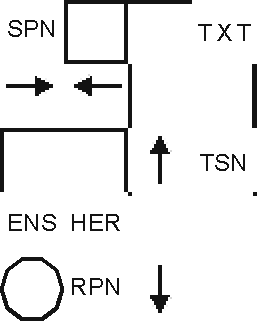
<style>
.page{position:relative;width:257px;height:321px;background:#ffffff}
.page>*{position:absolute;margin:0}
.t1{font:24px "ArialMT";color:#131313}
</style>
<div class="page">
<p class="t1" style="left:8px;top:20px;width:46px;height:17px">SPN</p>
<p class="t1" style="left:198px;top:24px;width:53px;height:17px">T X T</p>
<p class="t1" style="left:200px;top:154px;width:45px;height:17px">TSN</p>
<p class="t1" style="left:9px;top:214px;width:47px;height:17px">ENS</p>
<p class="t1" style="left:72px;top:214px;width:48px;height:17px">HER</p>
<p class="t1" style="left:72px;top:278px;width:47px;height:17px">RPN</p>
</div>
